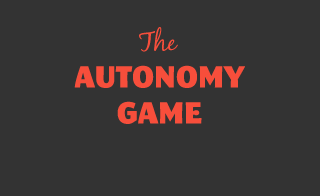
<style>
.page{position:relative;width:320px;height:196px;background:#333333}
.page>*{position:absolute;margin:0}
.t1{font:30px "MegalopolisExtra-Regular";color:#f74e3b}
</style>
<div class="page">
<p class="t1" style="left:74px;top:65px;width:171px;height:59px;text-align:center">AUTONOMY<br>GAME</p>
</div>
